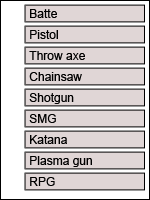
<style>
.page{position:relative;width:150px;height:200px;background:#e0d6d6}
.page>*{position:absolute;margin:0}
.t1{font:12px "ArialMT";color:#000000}
</style>
<div class="page">
<p class="t1" style="left:30px;top:9px;width:27px;height:9px">Batte</p>
<p class="t1" style="left:30px;top:30px;width:28px;height:9px">Pistol</p>
<p class="t1" style="left:29px;top:51px;width:56px;height:9px">Throw axe</p>
<p class="t1" style="left:29px;top:72px;width:53px;height:9px">Chainsaw</p>
<p class="t1" style="left:29px;top:93px;width:45px;height:11px">Shotgun</p>
<p class="t1" style="left:29px;top:114px;width:27px;height:9px">SMG</p>
<p class="t1" style="left:30px;top:135px;width:37px;height:9px">Katana</p>
<p class="t1" style="left:30px;top:156px;width:62px;height:11px">Plasma gun</p>
<p class="t1" style="left:30px;top:177px;width:25px;height:9px">RPG</p>
</div>
